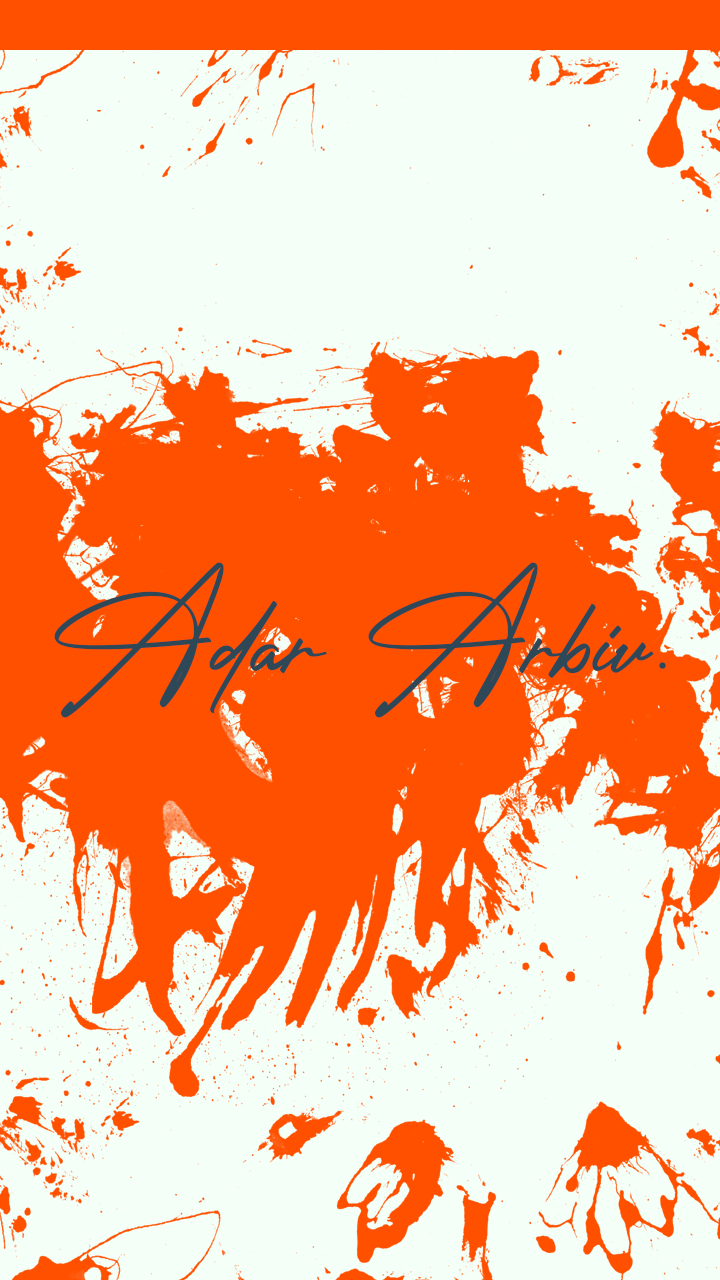
<style>
.page{position:relative;width:720px;height:1280px;background:#f4fff8}
.page>*{position:absolute;margin:0}
.t1{font:131.2px "PhotographSignature";color:#2f4858}
</style>
<div class="page">
<p class="t1" style="left:54px;top:562px;width:612px;height:156px">Adar Arbiv.</p>
</div>
